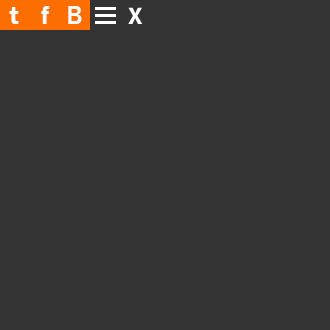
<style>
.page{position:relative;width:330px;height:330px;background:#333333}
.page>*{position:absolute;margin:0}
.t1{font:26px "FranklinGothic-Demi";color:#ffffff}
.t2{font:26px "FranklinGothic-Medium";color:#ffffff}
</style>
<div class="page">
<p class="t1" style="left:41px;top:6px;width:9px;height:18px">f</p>
<p class="t2" style="left:68px;top:6px;width:14px;height:18px">B</p>
<p class="t1" style="left:9px;top:7px;width:10px;height:17px">t</p>
</div>
